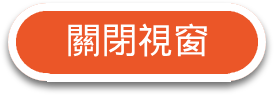
<style>
.page{position:relative;width:274px;height:95px;background:#eb5628}
.page>*{position:absolute;margin:0}
.t1{font:36px "DroidSansFallback";color:#ffffff}
</style>
<div class="page">
<p class="t1" style="left:68px;top:23px;width:140px;height:34px">關閉視窗</p>
</div>
